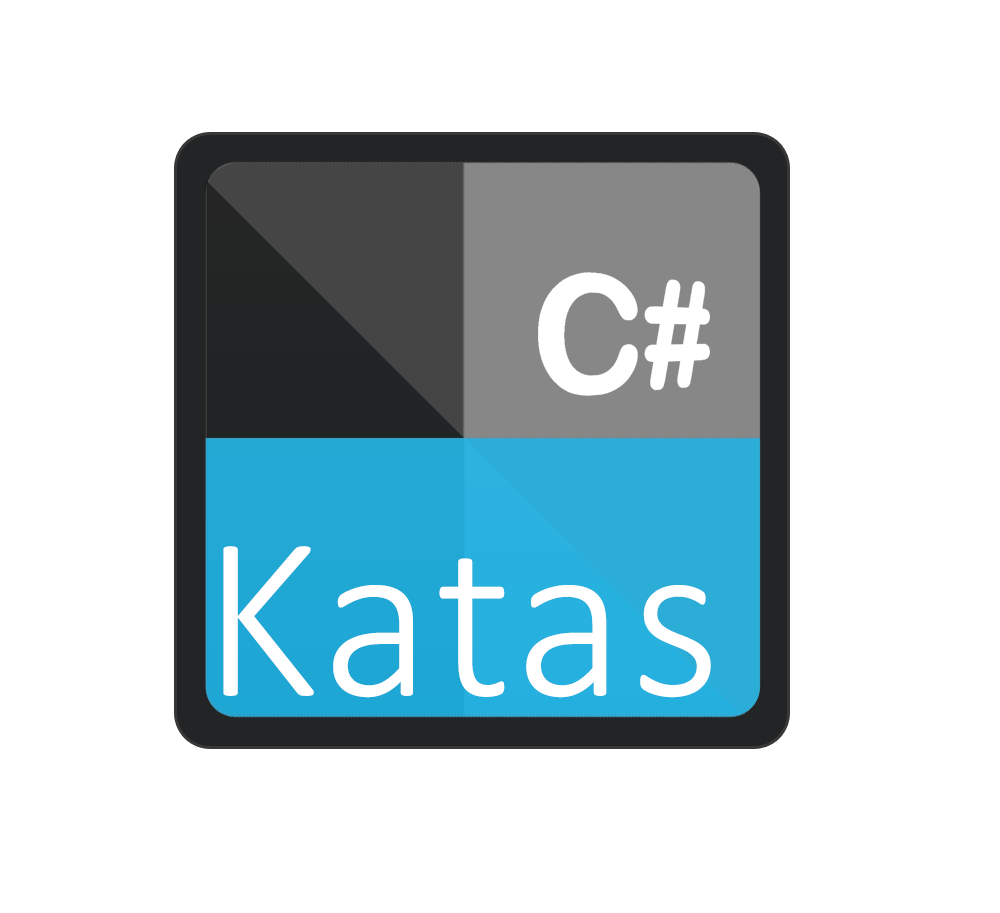
<style>
.page{position:relative;width:1000px;height:913px;background:#ffffff}
.page>*{position:absolute;margin:0}
.t1{font:234.2px "Calibri-Light";letter-spacing:0.025em;color:#ffffff}
</style>
<div class="page">
<p class="t1" style="left:223px;top:546px;width:488px;height:152px">Katas</p>
</div>
